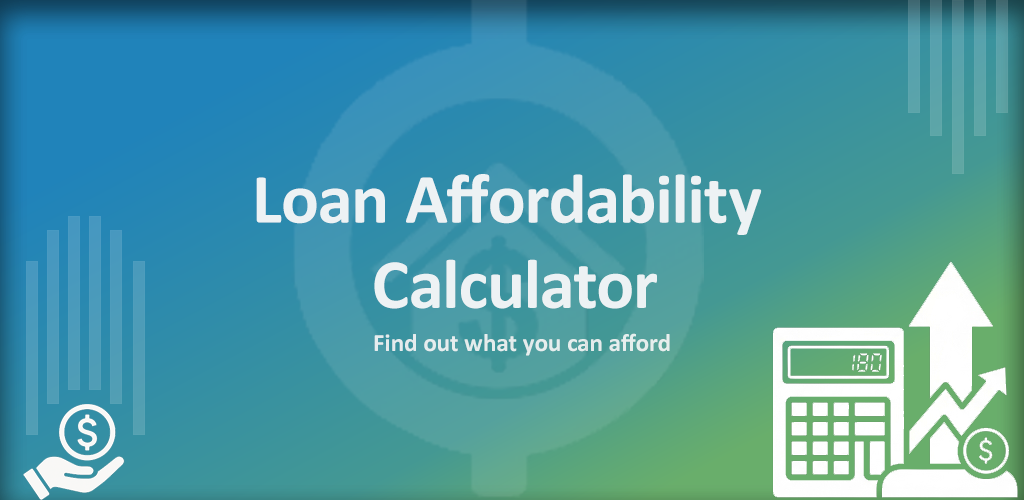
<style>
.page{position:relative;width:1024px;height:500px}
.page>*{position:absolute;margin:0}
.t1{font:70.8px "Calibri-Bold";color:#fefefe}
.t2{font:25px "Calibri-Bold";color:#f8f8f8}
</style>
<div class="page">
<p class="t1" style="left:256px;top:174px;width:506px;height:135px;text-align:center">Loan Affordability <br>Calculator</p>
<p class="t2" style="left:374px;top:333px;width:296px;height:23px;opacity:0.86">Find out what you can afford</p>
</div>
